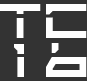
<style>
.page{position:relative;width:87px;height:81px;background:#333333}
.page>*{position:absolute;margin:0}
.t1{font:66.7px "[-fadetoblak-]-Regular";color:#ffffff}
</style>
<div class="page">
<p class="t1" style="left:0px;top:4px;width:87px;height:34px">TC</p>
<p class="t1" style="left:14px;top:43px;width:73px;height:34px">1 6</p>
</div>
